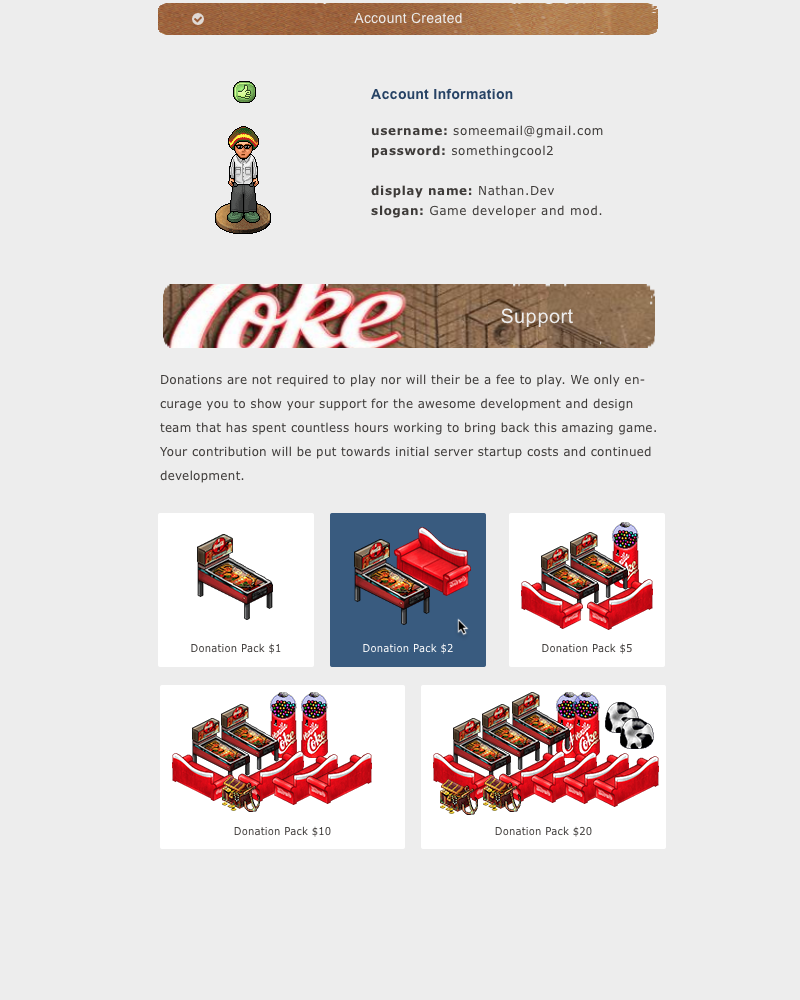
<style>
.page{position:relative;width:800px;height:1000px;background:#ededed}
.page>*{position:absolute;margin:0}
.t1{font:14px "ArialMT";letter-spacing:0.02em;color:#ededed}
.t2{font:14px "Arial-BoldMT";letter-spacing:0.02em;color:#274365}
.t3{font:12px/20px "Verdana";letter-spacing:0.05em;color:#3e3b39}
.t4{font:12px/20px "Verdana-Bold";letter-spacing:0.05em;color:#3e3b39}
.t5{font:20px "ArialMT";letter-spacing:0.02em;color:#ededed}
.t6{font:12px/24px "Verdana";letter-spacing:0.02em;color:#3e3b39}
.t7{font:10px "Verdana";letter-spacing:0.02em;color:#3e3b39}
.t8{font:10px "Verdana";letter-spacing:0.02em;color:#ffffff}
</style>
<div class="page">
<p class="t1" style="left:354px;top:12px;width:108px;height:12px">Account Created</p>
<p class="t2" style="left:371px;top:88px;width:142px;height:12px">Account Information</p>
<p class="t3" style="left:371px;top:125px;width:232px;height:93px"><span class="t4">username:</span> someemail@gmail.com<br><span class="t4">password:</span> somethingcool2<br><br><span class="t4">display name:</span> Nathan.Dev<br><span class="t4">slogan: </span>Game developer and mod.</p>
<p class="t5" style="left:501px;top:308px;width:72px;height:19px">Support</p>
<p class="t6" style="left:160px;top:374px;width:496px;height:109px">Donations are not required to play nor will their be a fee to play. We only encurage you to show your support for the awesome development and design team that has spent countless hours working to bring back this amazing game. Your contribution will be put towards initial server startup costs and continued development.</p>
<p class="t7" style="left:191px;top:643px;width:90px;height:11px">Donation Pack $1</p>
<p class="t8" style="left:363px;top:643px;width:90px;height:11px">Donation Pack $2</p>
<p class="t7" style="left:542px;top:643px;width:90px;height:11px">Donation Pack $5</p>
<p class="t7" style="left:234px;top:826px;width:97px;height:11px">Donation Pack $10</p>
<p class="t7" style="left:495px;top:826px;width:97px;height:11px">Donation Pack $20</p>
</div>
